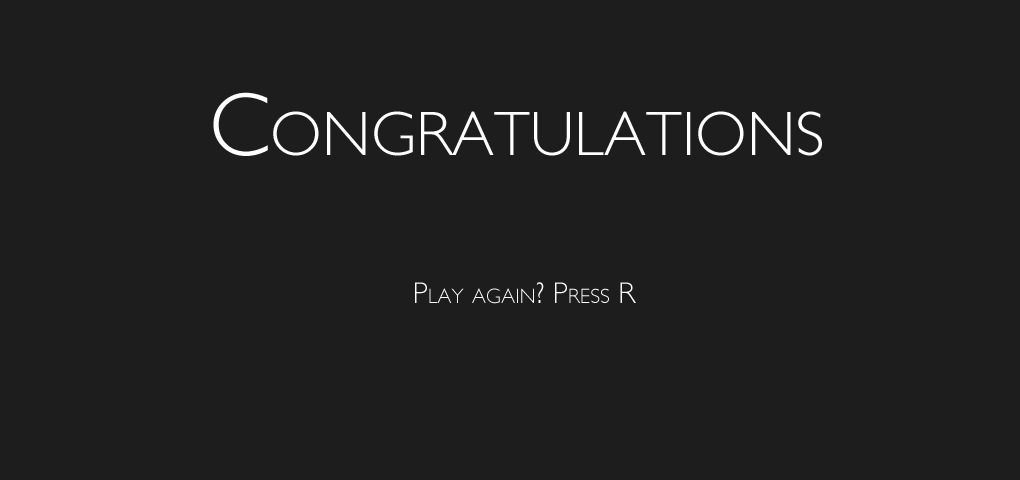
<style>
.page{position:relative;width:1020px;height:480px;background:#1d1d1d}
.page>*{position:absolute;margin:0}
.t1{font:90px "GillSans-Light";color:#ffffff;font-variant:small-caps}
.t2{font:30px "GillSans-Light";color:#ffffff;font-variant:small-caps}
</style>
<div class="page">
<p class="t1" style="left:213px;top:92px;width:609px;height:64px">Congratulations</p>
<p class="t2" style="left:415px;top:282px;width:221px;height:22px">Play again? Press R</p>
</div>
